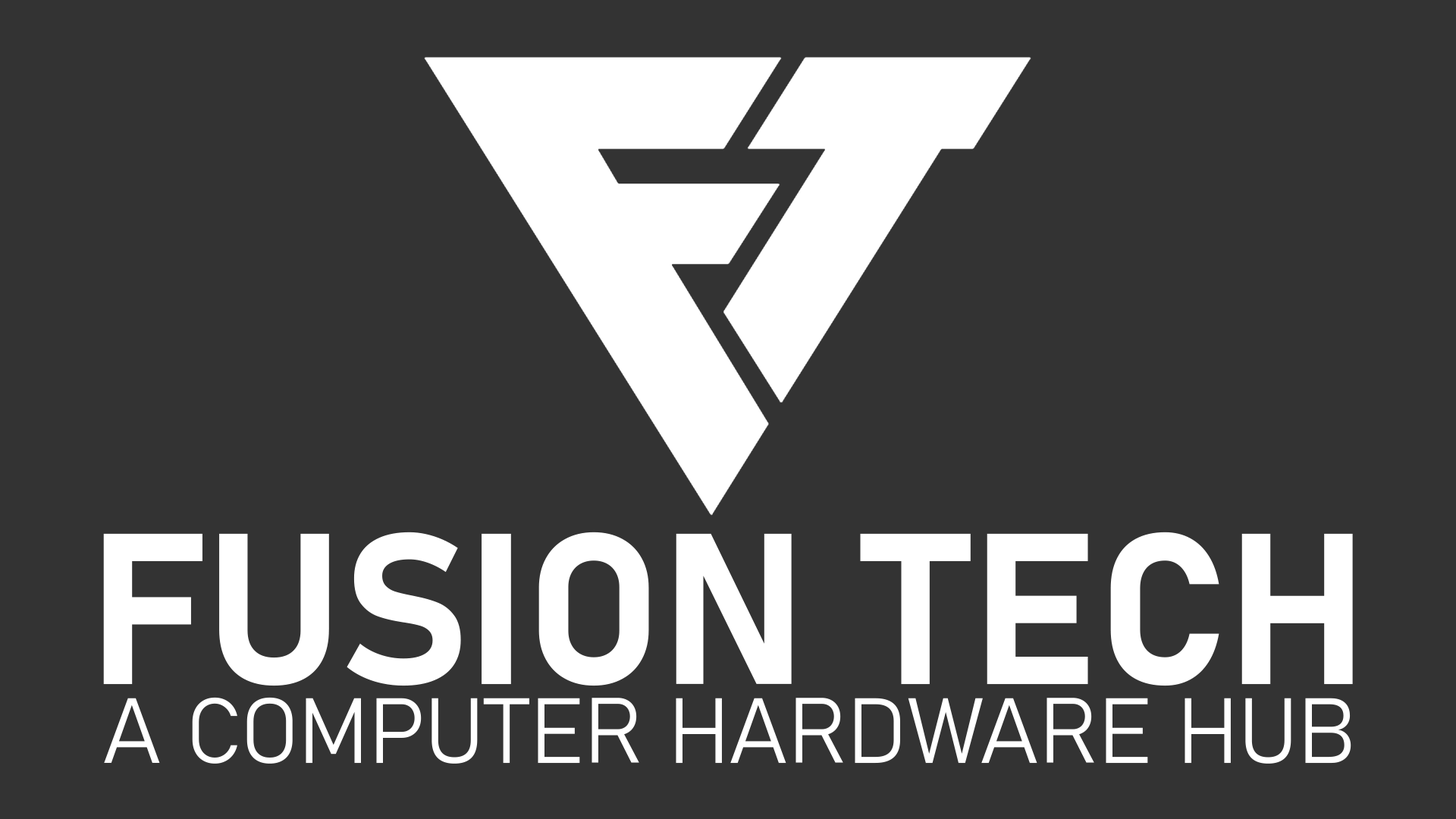
<style>
.page{position:relative;width:1456px;height:819px;background:#333333}
.page>*{position:absolute;margin:0}
.t1{font:211.3px "Bahnschrift-Bold";color:#ffffff;text-transform:uppercase}
.t2{font:91px "Bahnschrift-Light";color:#ffffff;text-transform:uppercase}
</style>
<div class="page">
<p class="t1" style="left:103px;top:532px;width:1250px;height:154px">FUSION TECH</p>
<p class="t2" style="left:104px;top:697px;width:1247px;height:67px">A computer hardware hub</p>
</div>
